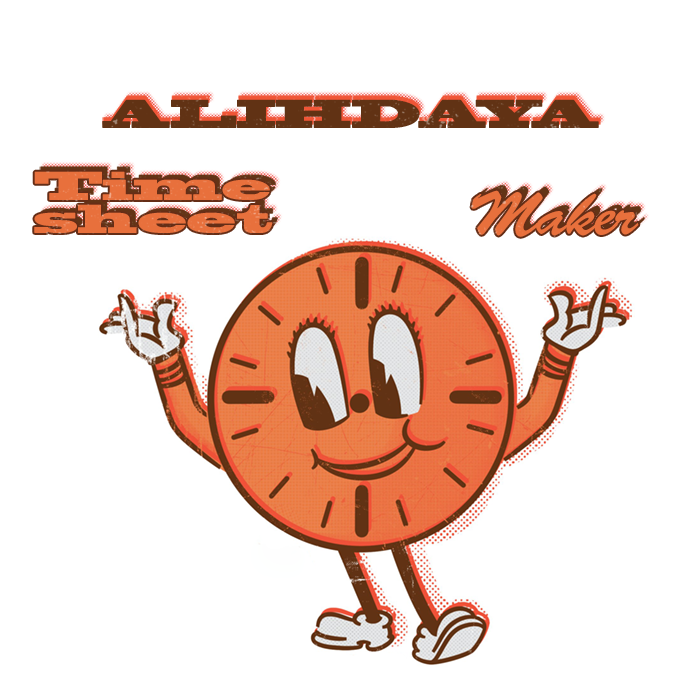
<style>
.page{position:relative;width:700px;height:700px;background:#ffffff}
.page>*{position:absolute;margin:0}
.t1{font:37.8px "BlackoakStd";letter-spacing:-0.02em;color:#613214}
.t2{font:37.8px/33.3px "BlackoakStd";letter-spacing:-0.02em;color:#e8703c}
.t3{font:61.4px "BrushScriptStd";letter-spacing:-0.02em;color:#e8703c}
</style>
<div class="page">
<p class="t1" style="left:102px;top:99px;width:497px;height:29px">ALIHDAYA</p>
<p class="t2" style="left:34px;top:171px;width:239px;height:62px;text-align:center">Time<br>sheet</p>
<p class="t3" style="left:471px;top:190px;width:168px;height:47px">Maker</p>
</div>
